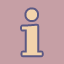
<style>
.page{position:relative;width:64px;height:64px;background:#c69fa5}
.page>*{position:absolute;margin:0}
.t1{font:72px "BodoniBT-Bold";color:#f2d3ab;font-weight:bold}
</style>
<div class="page">
<p class="t1" style="left:22px;top:9px;width:20px;height:47px">i</p>
</div>
